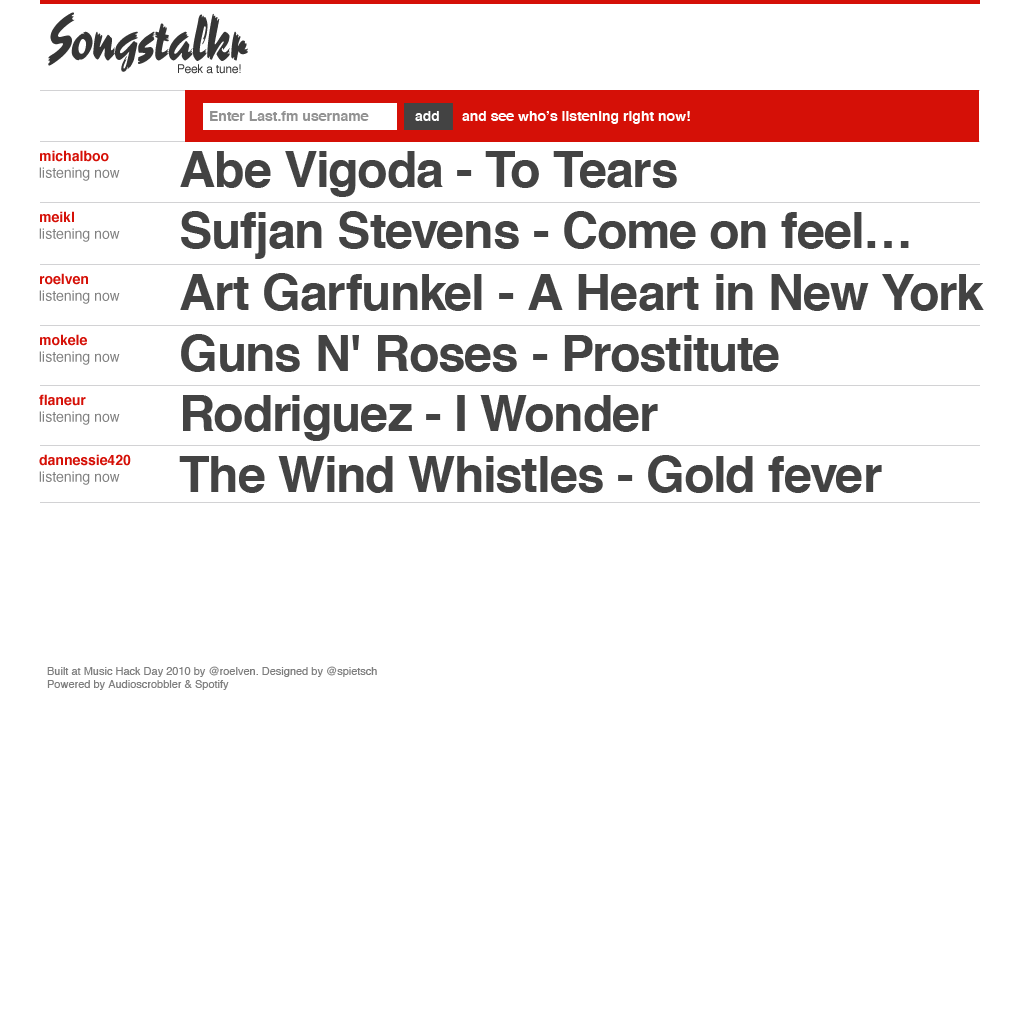
<style>
.page{position:relative;width:1020px;height:1020px;background:#ffffff}
.page>*{position:absolute;margin:0}
.t1{font:60px "Reporter-Two";letter-spacing:-0.015em;color:#363636}
.t2{font:12px "Helvetica";letter-spacing:-0.015em;color:#363636}
.t3{font:14px "Helvetica-Bold";color:#929292}
.t4{font:14px "Helvetica-Bold";color:#ffffff}
.t5{font:14px "Helvetica";color:#808080}
.t6{font:14px "Helvetica-Bold";color:#d51007}
.t7{font:50px "Helvetica-Bold";letter-spacing:-0.015em;color:#434343}
.t8{font:11px "Helvetica";color:#7e7e7e}
</style>
<div class="page">
<p class="t1" style="left:48px;top:12px;width:200px;height:60px">Songstalkr</p>
<p class="t2" style="left:178px;top:64px;width:63px;height:10px">Peek a tune!</p>
<p class="t3" style="left:210px;top:111px;width:159px;height:10px">Enter Last.fm username</p>
<p class="t4" style="left:415px;top:111px;width:24px;height:10px">add</p>
<p class="t4" style="left:462px;top:111px;width:228px;height:13px">and see who’s listening right now!</p>
<p class="t5" style="left:39px;top:150px;width:81px;height:31px"><span class="t6">michalboo<br></span>listening now</p>
<p class="t7" style="left:180px;top:151px;width:497px;height:46px">Abe Vigoda - To Tears</p>
<p class="t5" style="left:39px;top:211px;width:81px;height:31px"><span class="t6">meikl<br></span>listening now</p>
<p class="t7" style="left:181px;top:211px;width:728px;height:48px">Sufjan Stevens - Come on feel…</p>
<p class="t5" style="left:39px;top:273px;width:81px;height:31px"><span class="t6">roelven<br></span>listening now</p>
<p class="t7" style="left:180px;top:273px;width:804px;height:38px">Art Garfunkel - A Heart in New York</p>
<p class="t5" style="left:39px;top:334px;width:81px;height:31px"><span class="t6">mokele<br></span>listening now</p>
<p class="t7" style="left:181px;top:334px;width:598px;height:38px">Guns N' Roses - Prostitute</p>
<p class="t5" style="left:39px;top:394px;width:81px;height:31px"><span class="t6">flaneur<br></span>listening now</p>
<p class="t7" style="left:183px;top:395px;width:475px;height:46px">Rodriguez - I Wonder</p>
<p class="t5" style="left:39px;top:454px;width:92px;height:31px"><span class="t6">dannessie420<br></span>listening now</p>
<p class="t7" style="left:179px;top:455px;width:703px;height:38px">The Wind Whistles - Gold fever</p>
<p class="t8" style="left:47px;top:666px;width:330px;height:24px">Built at Music Hack Day 2010 by @roelven. Designed by @spietsch<br>Powered by Audioscrobbler &amp; Spotify</p>
</div>
